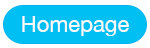
<style>
.page{position:relative;width:150px;height:48px;background:#00bff3}
.page>*{position:absolute;margin:0}
.t1{font:22px "HelveticaNeue";color:#fafafa}
</style>
<div class="page">
<p class="t1" style="left:22px;top:16px;width:107px;height:20px">Homepage</p>
</div>
